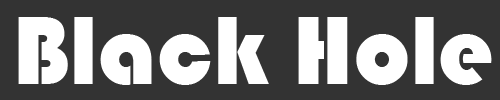
<style>
.page{position:relative;width:500px;height:100px;background:#333333}
.page>*{position:absolute;margin:0}
.t1{font:100px "Bauhaus93";color:#ffffff}
</style>
<div class="page">
<p class="t1" style="left:18px;top:17px;width:474px;height:68px">Black Hole</p>
</div>
